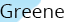
<style>
.page{position:relative;width:64px;height:22px;background:#ffffff}
.page>*{position:absolute;margin:0}
.t1{font:19px "OpenSans";color:#000000}
</style>
<div class="page">
<p class="t1" style="left:0px;top:4px;width:64px;height:14px">Greene</p>
</div>
